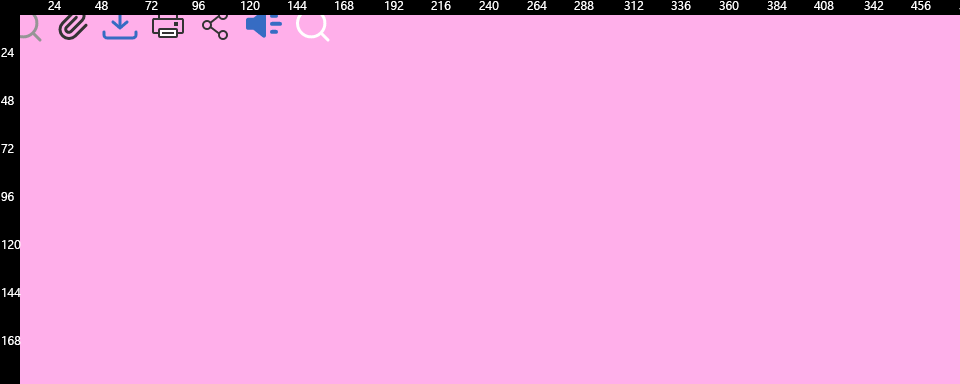
<style>
.page{position:relative;width:960px;height:384px;background:#ffafea}
.page>*{position:absolute;margin:0}
.t1{font:12px "MalgunGothic";color:#ffffff}
</style>
<div class="page">
<p class="t1" style="left:48px;top:1px;width:13px;height:9px">24</p>
<p class="t1" style="left:95px;top:1px;width:13px;height:9px">48</p>
<p class="t1" style="left:145px;top:1px;width:13px;height:9px">72</p>
<p class="t1" style="left:192px;top:1px;width:13px;height:9px">96</p>
<p class="t1" style="left:241px;top:1px;width:19px;height:9px">120</p>
<p class="t1" style="left:288px;top:1px;width:19px;height:9px">144</p>
<p class="t1" style="left:335px;top:1px;width:19px;height:9px">168</p>
<p class="t1" style="left:385px;top:1px;width:19px;height:9px">192</p>
<p class="t1" style="left:431px;top:1px;width:20px;height:9px">216</p>
<p class="t1" style="left:479px;top:1px;width:20px;height:9px">240</p>
<p class="t1" style="left:527px;top:1px;width:20px;height:9px">264</p>
<p class="t1" style="left:574px;top:1px;width:20px;height:9px">288</p>
<p class="t1" style="left:624px;top:1px;width:20px;height:9px">312</p>
<p class="t1" style="left:671px;top:1px;width:20px;height:9px">336</p>
<p class="t1" style="left:719px;top:1px;width:20px;height:9px">360</p>
<p class="t1" style="left:767px;top:1px;width:20px;height:9px">384</p>
<p class="t1" style="left:814px;top:1px;width:20px;height:9px">408</p>
<p class="t1" style="left:864px;top:1px;width:20px;height:9px">342</p>
<p class="t1" style="left:911px;top:1px;width:20px;height:9px">456</p>
<p class="t1" style="left:1px;top:48px;width:13px;height:9px">24</p>
<p class="t1" style="left:1px;top:96px;width:13px;height:9px">48</p>
<p class="t1" style="left:1px;top:144px;width:13px;height:9px">72</p>
<p class="t1" style="left:1px;top:192px;width:13px;height:9px">96</p>
<p class="t1" style="left:2px;top:240px;width:19px;height:9px">120</p>
<p class="t1" style="left:2px;top:288px;width:19px;height:9px">144</p>
<p class="t1" style="left:2px;top:336px;width:19px;height:9px">168</p>
</div>
